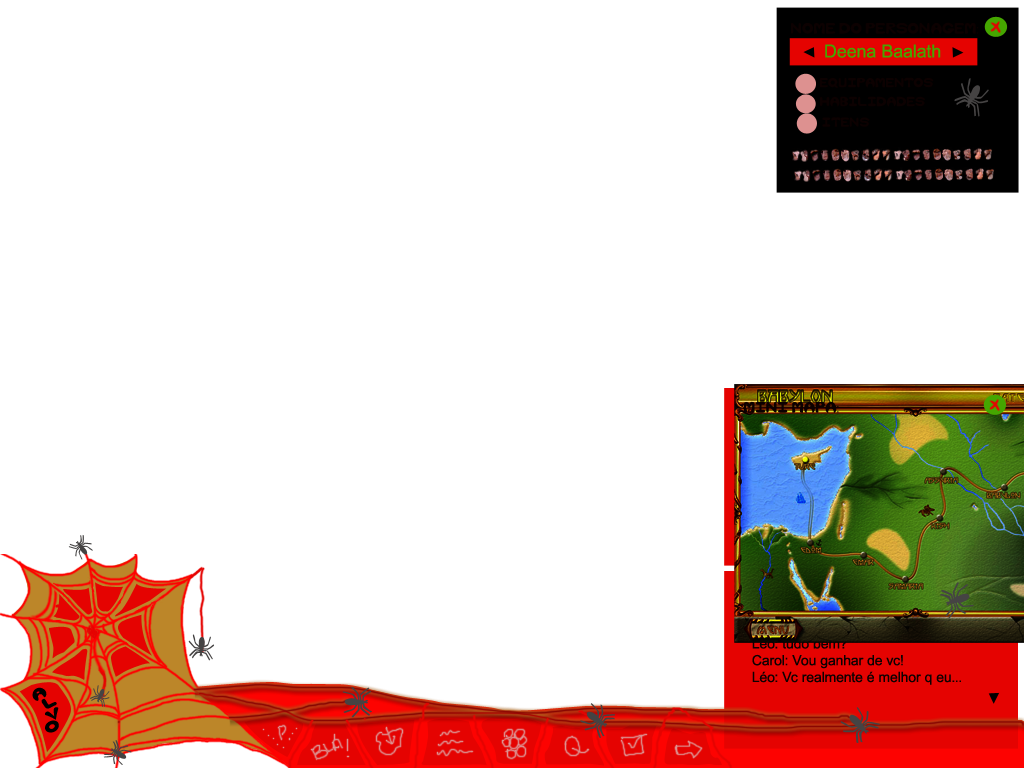
<style>
.page{position:relative;width:1024px;height:768px;background:#ffffff}
.page>*{position:absolute;margin:0}
.t1{font:14px "Bubble-Regular";color:#0c0101}
.t2{font:18px "ArialMT";color:#46a600}
.t3{font:12.1px "Bubble-Regular";color:#0c0101}
.t4{font:17.3px "Bubble-Regular";color:#e50301}
.t5{font:14px "ArialMT";color:#0c0101}
.t6{font:14px/64px "ArialTh";color:#0c0101}
.t7{font:14px "Bubble-Regular";color:#000000}
</style>
<div class="page">
<p class="t1" style="left:791px;top:22px;width:188px;height:12px">Nome do personagem:</p>
<p class="t2" style="left:825px;top:44px;width:116px;height:14px">Deena Baalath</p>
<p class="t3" style="left:820px;top:77px;width:114px;height:11px">equipamentos</p>
<p class="t3" style="left:820px;top:96px;width:105px;height:11px">habilidades</p>
<p class="t3" style="left:822px;top:117px;width:48px;height:10px">itens</p>
<p class="t1" style="left:744px;top:401px;width:95px;height:12px">Mini Mapa:</p>
<p class="t4" style="left:55px;top:604px;width:16px;height:14px;rotate:1deg">3</p>
<p class="t5" style="left:752px;top:621px;width:209px;height:64px">Carol: olá!<br>Léo: tudo bem?<br>Carol: Vou ganhar de vc!<br>Léo: Vc realmente é melhor q eu...<br><span class="t6"><br><br>Léo:</span></p>
<p class="t7" style="left:32px;top:687px;width:15px;height:14px;rotate:-5deg">A</p>
<p class="t7" style="left:41px;top:698px;width:16px;height:11px;rotate:-5deg">l</p>
<p class="t7" style="left:45px;top:707px;width:14px;height:13px;rotate:-5deg">v</p>
<p class="t7" style="left:45px;top:720px;width:14px;height:13px;rotate:-5deg">o</p>
</div>
